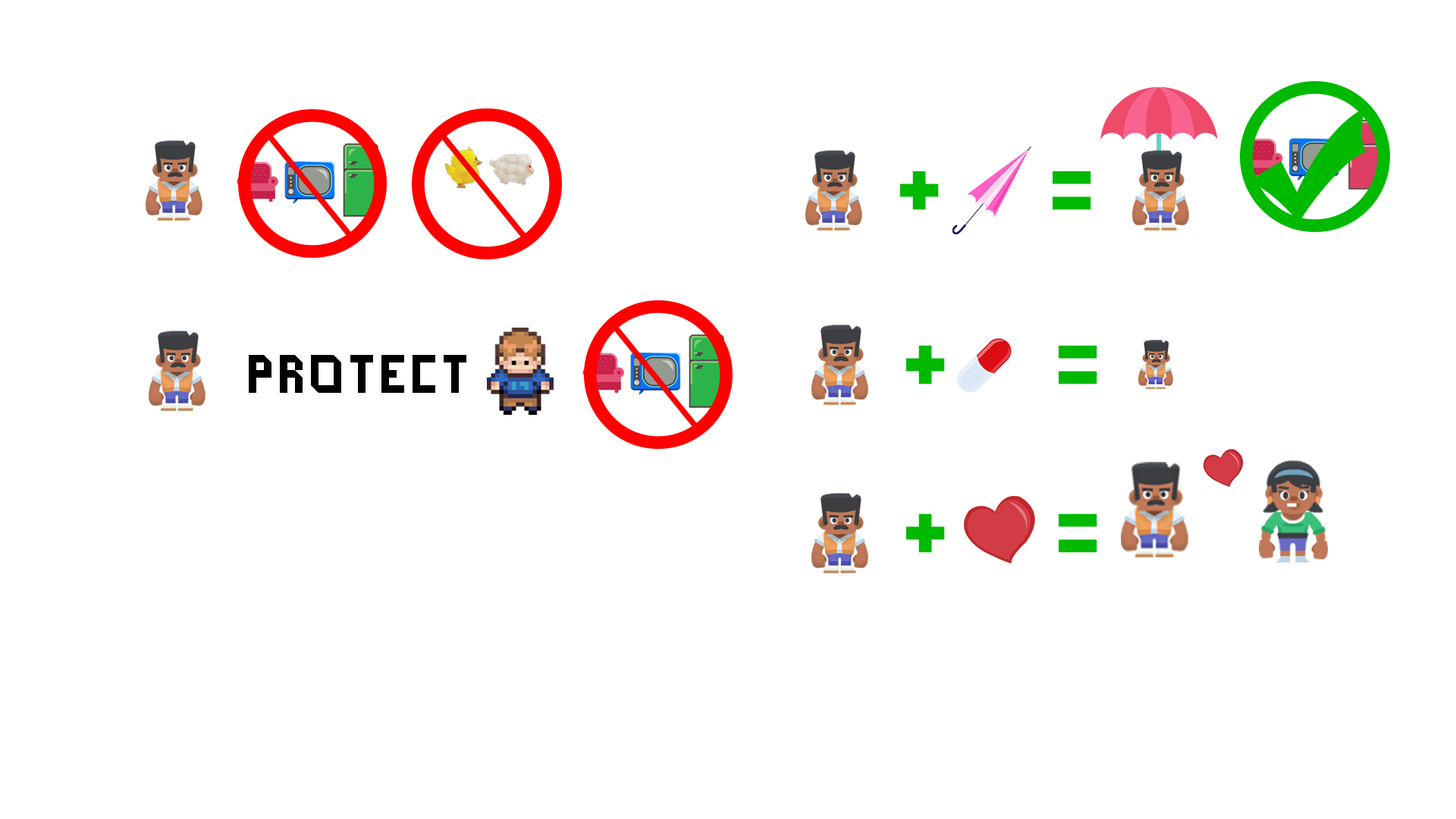
<style>
.page{position:relative;width:1456px;height:819px;background:#ffffff}
.page>*{position:absolute;margin:0}
.t1{font:63.7px "PixelFont";letter-spacing:0.025em;color:#01b901}
.t2{font:37.9px "PixelFont";letter-spacing:0.025em;color:#000000}
</style>
<div class="page">
<p class="t1" style="left:900px;top:171px;width:39px;height:39px">+</p>
<p class="t1" style="left:1053px;top:171px;width:38px;height:39px">=</p>
<p class="t1" style="left:906px;top:345px;width:39px;height:39px">+</p>
<p class="t1" style="left:1059px;top:345px;width:38px;height:39px">=</p>
<p class="t2" style="left:249px;top:355px;width:217px;height:38px">protect</p>
<p class="t1" style="left:906px;top:513px;width:39px;height:40px">+</p>
<p class="t1" style="left:1059px;top:513px;width:38px;height:40px">=</p>
</div>
